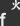
<style>
.page{position:relative;width:20px;height:26px;background:#333333}
.page>*{position:absolute;margin:0}
.t1{font:12px "DFKaiShu-SB-Estd-BF";color:#ececec;font-weight:bold}
.t2{font:18px "ArialMT";color:#ececec;font-weight:bold}
</style>
<div class="page">
<p class="t1" style="left:11px;top:0px;width:11px;height:10px">火</p>
<p class="t2" style="left:0px;top:12px;width:6px;height:15px">f</p>
</div>
